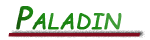
<style>
.page{position:relative;width:150px;height:40px;background:#ffffff}
.page>*{position:absolute;margin:0}
.t1{font:30px "ComicSansMS";color:#1c8a13;font-variant:small-caps;font-weight:bold;font-style:italic}
.t2{font:32.9px "ComicSansMS";color:#800c1f;font-variant:small-caps;font-weight:bold;font-style:italic}
</style>
<div class="page">
<p class="t1" style="left:16px;top:6px;width:106px;height:24px">Paladin</p>
<p class="t2" style="left:8px;top:33px;width:132px;height:4px">______</p>
</div>
